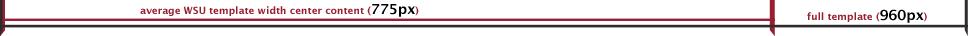
<style>
.page{position:relative;width:968px;height:36px;background:#ffffff}
.page>*{position:absolute;margin:0}
.t1{font:10px "LucidaSans-Demi";color:#981f32}
.t2{font:14px "LucidaSans-Demi";color:#000000}
</style>
<div class="page">
<p class="t1" style="left:140px;top:4px;width:279px;height:13px">average WSU template width center content (<span class="t2">775px</span>)</p>
<p class="t1" style="left:807px;top:9px;width:120px;height:14px">full template (<span class="t2">960px</span>)</p>
</div>
